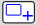
<style>
.page{position:relative;width:37px;height:25px;background:#ffffff}
.page>*{position:absolute;margin:0}
.t1{font:18px "TimesNewRomanPSMT";color:#0000ff;font-weight:bold}
</style>
<div class="page">
<p class="t1" style="left:22px;top:11px;width:11px;height:10px">+</p>
</div>
